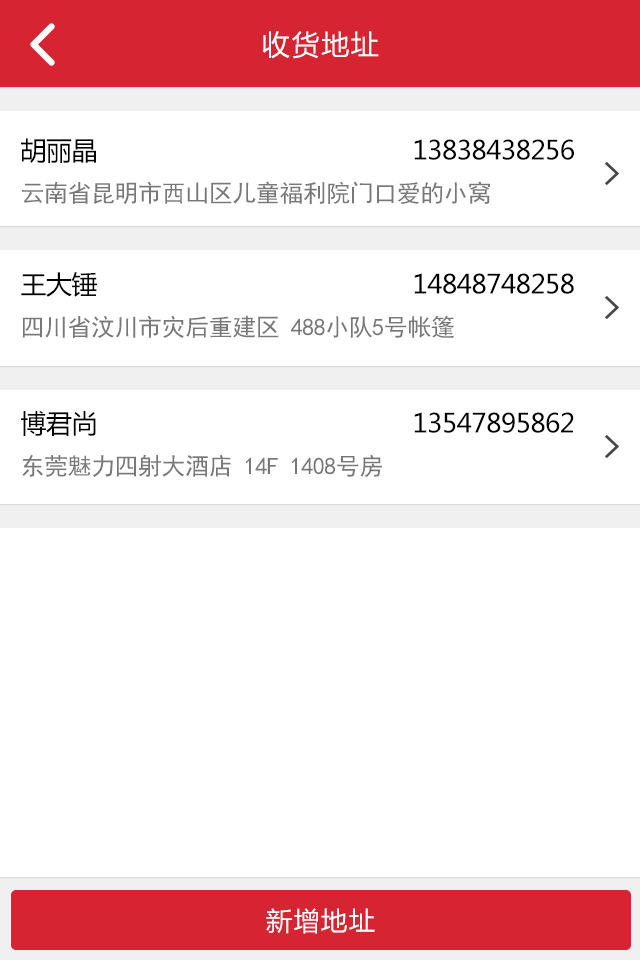
<style>
.page{position:relative;width:640px;height:960px;background:#ffffff}
.page>*{position:absolute;margin:0}
.t1{font:28px "MicrosoftYaHei";letter-spacing:0.06em;color:#ffffff}
.t2{font:26px "MicrosoftYaHei";letter-spacing:-0.02em;color:#000000}
.t3{font:24px "SimHei";letter-spacing:-0.02em;color:#878787}
.t4{font:26px "MicrosoftYaHei";letter-spacing:0.06em;color:#ffffff}
</style>
<div class="page">
<p class="t1" style="left:262px;top:31px;width:117px;height:28px">收货地址</p>
<p class="t2" style="left:21px;top:138px;width:553px;height:25px">胡丽晶                                            13838438256</p>
<p class="t3" style="left:22px;top:181px;width:468px;height:23px">云南省昆明市西山区儿童福利院门口爱的小窝</p>
<p class="t2" style="left:21px;top:272px;width:553px;height:25px">王大锤                                            14848748258</p>
<p class="t3" style="left:22px;top:315px;width:432px;height:23px">四川省汶川市灾后重建区 488小队5号帐篷</p>
<p class="t2" style="left:21px;top:411px;width:553px;height:25px">博君尚                                            13547895862</p>
<p class="t3" style="left:22px;top:454px;width:360px;height:24px">东莞魅力四射大酒店 14F 1408号房</p>
<p class="t4" style="left:266px;top:908px;width:109px;height:26px">新增地址</p>
</div>
